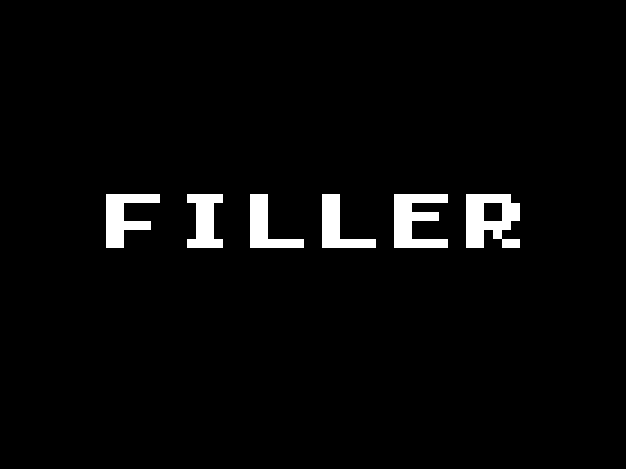
<style>
.page{position:relative;width:626px;height:469px;background:#000000}
.page>*{position:absolute;margin:0}
.t1{font:72px "Early-GameBoy";color:#ffffff}
</style>
<div class="page">
<p class="t1" style="left:106px;top:194px;width:414px;height:54px">FILLER</p>
</div>
